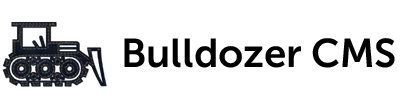
<style>
.page{position:relative;width:400px;height:108px;background:#ffffff}
.page>*{position:absolute;margin:0}
.t1{font:40px "MuseoSansCyrl-700";color:#000000}
</style>
<div class="page">
<p class="t1" style="left:124px;top:38px;width:271px;height:30px">Bulldozer CMS</p>
</div>
